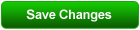
<style>
.page{position:relative;width:140px;height:30px}
.page>*{position:absolute;margin:0}
.t1{font:13px "Arial-BoldMT";letter-spacing:-0.025em;color:#fefefe}
</style>
<div class="page">
<p class="t1" style="left:26px;top:9px;width:86px;height:13px">Save Changes</p>
</div>
